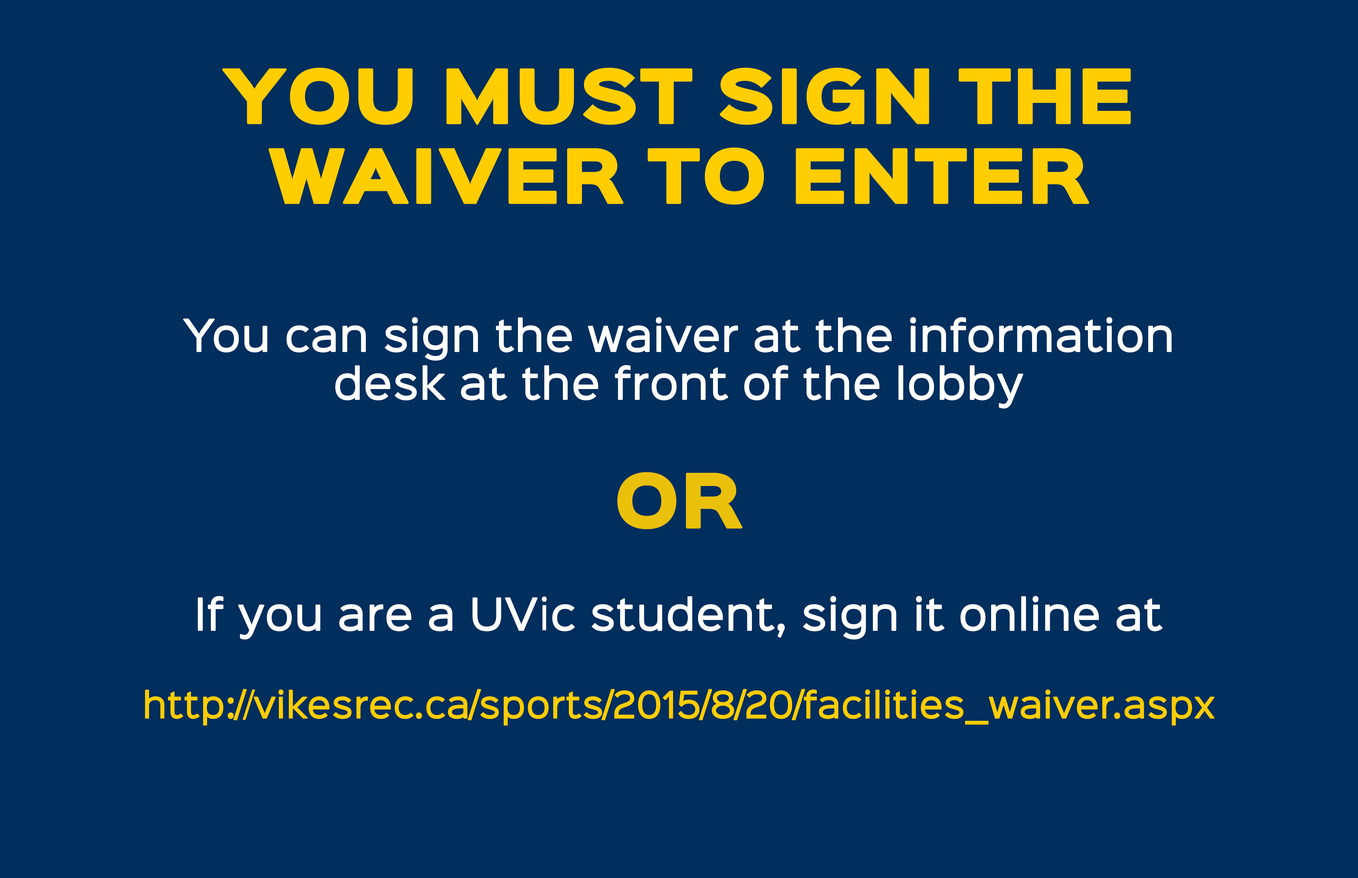
<style>
.page{position:relative;width:1358px;height:878px;background:#002e5d}
.page>*{position:absolute;margin:0}
.t1{font:66.5px "SinkinSans-800Black";color:#ffcd00;font-weight:bold}
.t2{font:39.9px "SinkinSans-400Regular";color:#ffffff;font-weight:bold}
.t3{font:66.5px "SinkinSans-800Black";color:#ebc00a;font-weight:bold}
.t4{font:33.3px "SinkinSans-400Regular";color:#ffcd00;font-weight:bold}
</style>
<div class="page">
<p class="t1" style="left:222px;top:68px;width:908px;height:137px;text-align:center">YOU MUST SIGN THE WAIVER TO ENTER</p>
<p class="t2" style="left:183px;top:317px;width:988px;height:92px;text-align:center">You can sign the waiver at the information desk at the front of the lobby</p>
<p class="t3" style="left:617px;top:472px;width:125px;height:57px">OR</p>
<p class="t4" style="left:145px;top:596px;width:1069px;height:130px;text-align:center"><span class="t2">If you are a UVic student, sign it online at<br><br></span>http://vikesrec.ca/sports/2015/8/20/facilities_waiver.aspx</p>
</div>
